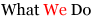
<style>
.page{position:relative;width:94px;height:18px;background:#ffffff}
.page>*{position:absolute;margin:0}
.t1{font:16px "Georgia";color:#000000}
.t2{font:16px "Georgia";color:#ff0000}
</style>
<div class="page">
<p class="t1" style="left:1px;top:3px;width:90px;height:13px">What <span class="t2">We</span> Do</p>
</div>
